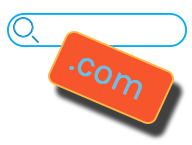
<style>
.page{position:relative;width:192px;height:145px;background:#ffffff}
.page>*{position:absolute;margin:0}
.t1{font:36px "Karla-Regular";color:#5cc5ef}
</style>
<div class="page">
<p class="t1" style="left:69px;top:58px;width:73px;height:42px;rotate:24deg">.com</p>
</div>
